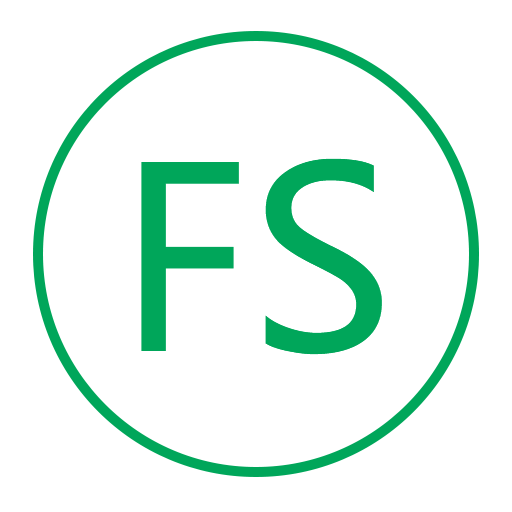
<style>
.page{position:relative;width:512px;height:512px;background:#ffffff}
.page>*{position:absolute;margin:0}
.t1{font:250px "MicrosoftYaHei";color:#00a65a}
</style>
<div class="page">
<p class="t1" style="left:141px;top:158px;width:241px;height:197px">FS</p>
</div>
